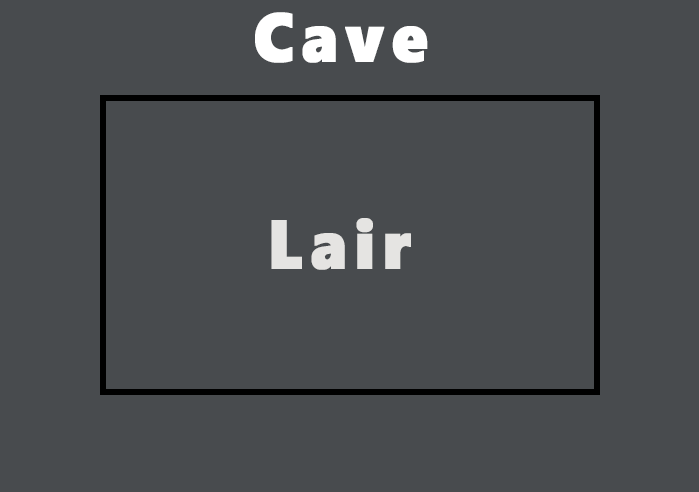
<style>
.page{position:relative;width:699px;height:492px;background:#484b4e}
.page>*{position:absolute;margin:0}
.t1{font:68.5px "SegoeWP-Black";letter-spacing:0.1em;color:#ffffff;font-weight:bold;scale:0.93 1}
.t2{font:68.5px "SegoeWP-Black";letter-spacing:0.1em;color:#e5e4e2;font-weight:bold;scale:0.93 1}
</style>
<div class="page">
<p class="t1" style="left:255px;top:12px;width:173px;height:51px">Cave</p>
<p class="t2" style="left:271px;top:218px;width:140px;height:52px">Lair</p>
</div>
